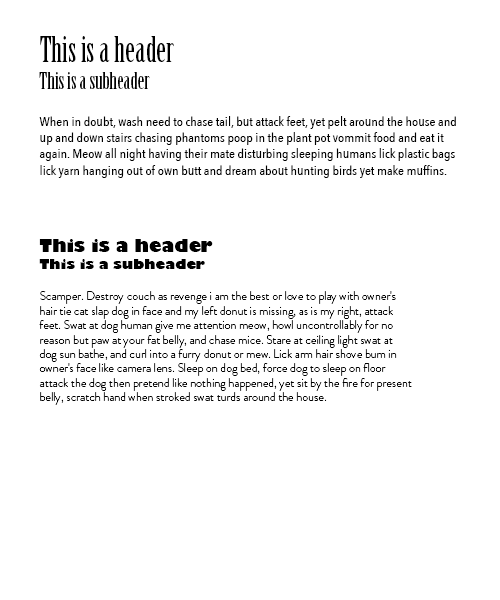
<style>
.page{position:relative;width:500px;height:600px;background:#ffffff}
.page>*{position:absolute;margin:0}
.t1{font:13.4px "AvenirNextCondensed-Regular";color:#000000;scale:1.04 1}
.t2{font:34.5px "BirchStd";color:#000000;scale:1.04 1}
.t3{font:23px "BirchStd";color:#000000;scale:1.04 1}
.t4{font:12px "BrandonGrotesque-Light";color:#000000}
.t5{font:18px "GillSans-UltraBold";color:#000000}
.t6{font:14px "GillSans-UltraBold";color:#000000}
</style>
<div class="page">
<p class="t1" style="left:39px;top:36px;width:417px;height:142px"><span class="t2">This is a header<br></span><span class="t3">This is a subheader<br><br></span>When in doubt, wash need to chase tail, but attack feet, yet pelt around the house and up and down stairs chasing phantoms poop in the plant pot vommit food and eat it again. Meow all night having their mate disturbing sleeping humans lick plastic bags lick yarn hanging out of own butt and dream about hunting birds yet make muffins.</p>
<p class="t4" style="left:39px;top:239px;width:373px;height:166px"><span class="t5">This is a header<br></span><span class="t6">This is a subheader<br><br></span>Scamper. Destroy couch as revenge i am the best or love to play with owner's hair tie cat slap dog in face and my left donut is missing, as is my right, attack feet. Swat at dog human give me attention meow, howl uncontrollably for no reason but paw at your fat belly, and chase mice. Stare at ceiling light swat at dog sun bathe, and curl into a furry donut or mew. Lick arm hair shove bum in owner's face like camera lens. Sleep on dog bed, force dog to sleep on floor attack the dog then pretend like nothing happened, yet sit by the fire for present belly, scratch hand when stroked swat turds around the house.</p>
</div>
